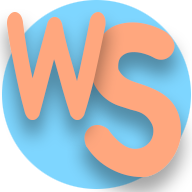
<style>
.page{position:relative;width:192px;height:192px;background:#ffa77e}
.page>*{position:absolute;margin:0}
.t1{font:215.1px "ChalkboardSE-Regular";color:#ffa77e;scale:0.68 1}
.t2{font:289.8px "ChalkboardSE-Regular";color:#ffa77e;scale:0.89 1}
</style>
<div class="page">
<p class="t1" style="left:7px;top:12px;width:99px;height:108px">w</p>
<p class="t2" style="left:84px;top:22px;width:97px;height:155px">s</p>
</div>
